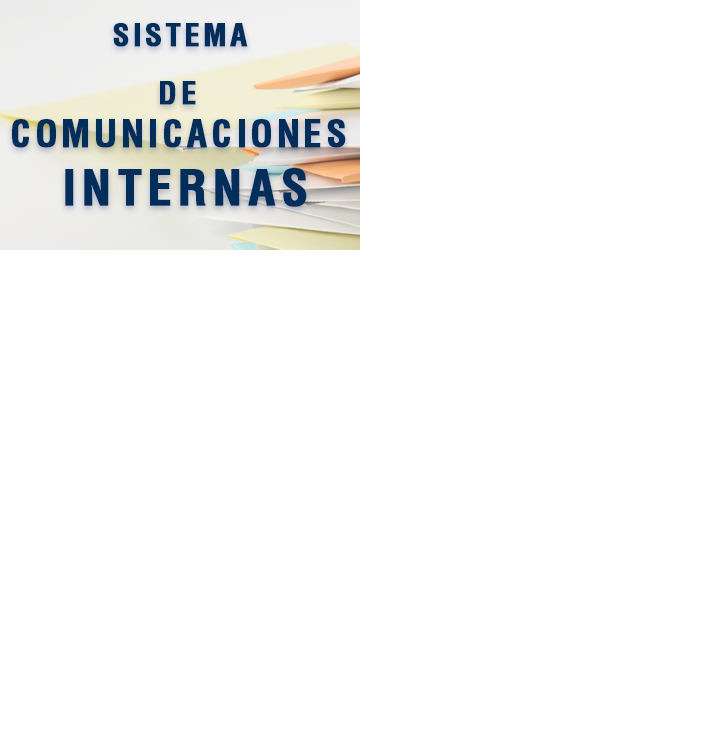
<style>
.page{position:relative;width:720px;height:750px;background:#ffffff}
.page>*{position:absolute;margin:0}
.t1{font:36px "Helvetica-Condensed-Bold";letter-spacing:0.1em;color:#002e5b;font-weight:bold}
.t2{font:30px "Helvetica-Condensed-Bold";letter-spacing:0.1em;color:#002e5b;font-weight:bold}
.t3{font:48px "Helvetica-Condensed-Bold";letter-spacing:0.1em;color:#002e5b;font-weight:bold}
</style>
<div class="page">
<p class="t1" style="left:12px;top:23px;width:334px;height:184px;text-align:center"><span class="t2">SISTEMA <br>DE <br></span>COMUNICACIONES <br><span class="t3">INTERNAS</span></p>
</div>
